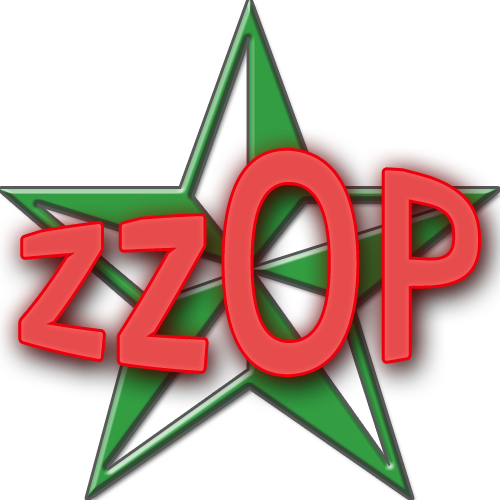
<style>
.page{position:relative;width:500px;height:500px;background:#ffffff}
.page>*{position:absolute;margin:0}
.t1{font:200px "Mentone-SemiBold";color:#e64c4c}
</style>
<div class="page">
<p class="t1" style="left:21px;top:150px;width:457px;height:225px">zzOP</p>
</div>
